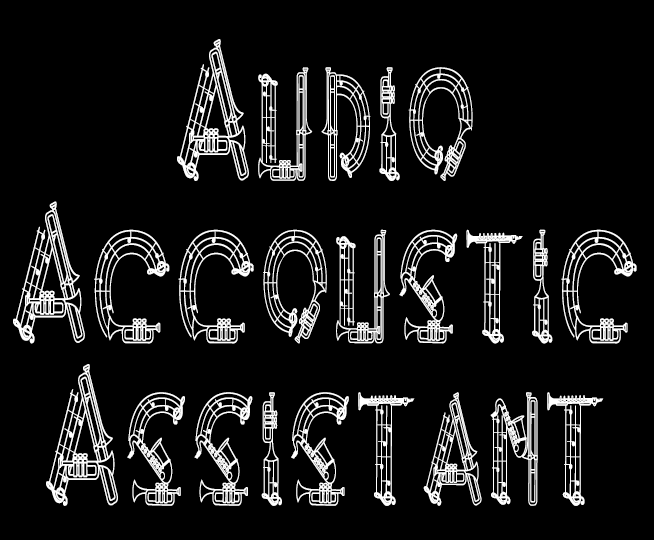
<style>
.page{position:relative;width:654px;height:540px;background:#000000}
.page>*{position:absolute;margin:0}
.t1{font:170px/162.5px "AlphaMusicMan";letter-spacing:0.08em;color:#ffffff;scale:0.66 1}
</style>
<div class="page">
<p class="t1" style="left:13px;top:39px;width:624px;height:467px;text-align:center">Audio<br>Accoustic<br>Assistant</p>
</div>
